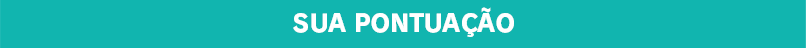
<style>
.page{position:relative;width:806px;height:48px;background:#11b5af}
.page>*{position:absolute;margin:0}
.t1{font:24px "RodinPro-EB";letter-spacing:-0.014em;color:#ffffff}
</style>
<div class="page">
<p class="t1" style="left:293px;top:7px;width:221px;height:30px">SUA PONTUAÇÃO</p>
</div>
